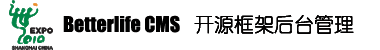
<style>
.page{position:relative;width:380px;height:50px;background:#ffffff}
.page>*{position:absolute;margin:0}
.t1{font:20px "Impact";color:#010000}
.t2{font:20px "YouYuan";color:#010000}
</style>
<div class="page">
<p class="t1" style="left:63px;top:15px;width:117px;height:18px">Betterlife CMS</p>
<p class="t2" style="left:194px;top:15px;width:160px;height:19px">开源框架后台管理</p>
<p class="t2" style="left:194px;top:15px;width:160px;height:19px">开源框架后台管理</p>
<p class="t2" style="left:194px;top:15px;width:160px;height:19px">开源框架后台管理</p>
</div>
